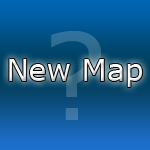
<style>
.page{position:relative;width:150px;height:150px}
.page>*{position:absolute;margin:0}
.t1{font:120px "Verdana"}
.t2{font:30px "Verdana";color:#ffffff}
</style>
<div class="page">
<p class="t1" style="left:51px;top:31px;width:50px;height:89px">?</p>
<p class="t2" style="left:9px;top:59px;width:134px;height:28px">New Map</p>
</div>
